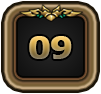
<style>
.page{position:relative;width:101px;height:94px}
.page>*{position:absolute;margin:0}
.t1{font:31.6px "Tahoma-Bold";scale:1.13 1}
</style>
<div class="page">
<p class="t1" style="left:29px;top:36px;width:43px;height:23px">09</p>
</div>
